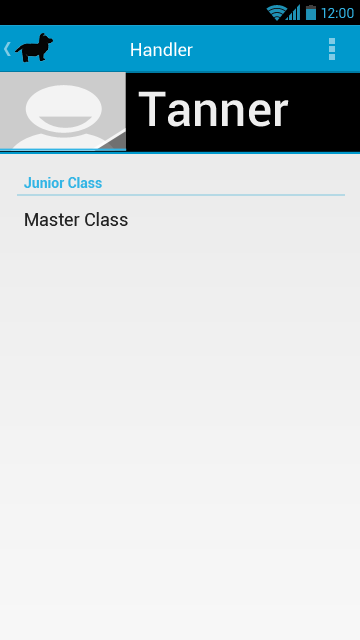
<style>
.page{position:relative;width:360px;height:640px}
.page>*{position:absolute;margin:0}
.t1{font:14px "Roboto-Regular";color:#33b5e5}
.t2{font:18px "Roboto-Regular";color:#ffffff}
.t3{font:48px "Roboto-Medium";color:#eeeeee}
.t4{font:14px "Roboto-Bold";color:#33b5e5}
.t5{font:18px "Roboto-Regular";color:#222222}
</style>
<div class="page">
<p class="t1" style="left:321px;top:8px;width:33px;height:10px">12:00</p>
<p class="t2" style="left:131px;top:42px;width:62px;height:15px">Handler</p>
<p class="t3" style="left:138px;top:91px;width:151px;height:36px">Tanner</p>
<p class="t4" style="left:24px;top:177px;width:78px;height:11px">Junior Class</p>
<p class="t5" style="left:25px;top:212px;width:103px;height:14px">Master Class</p>
</div>
